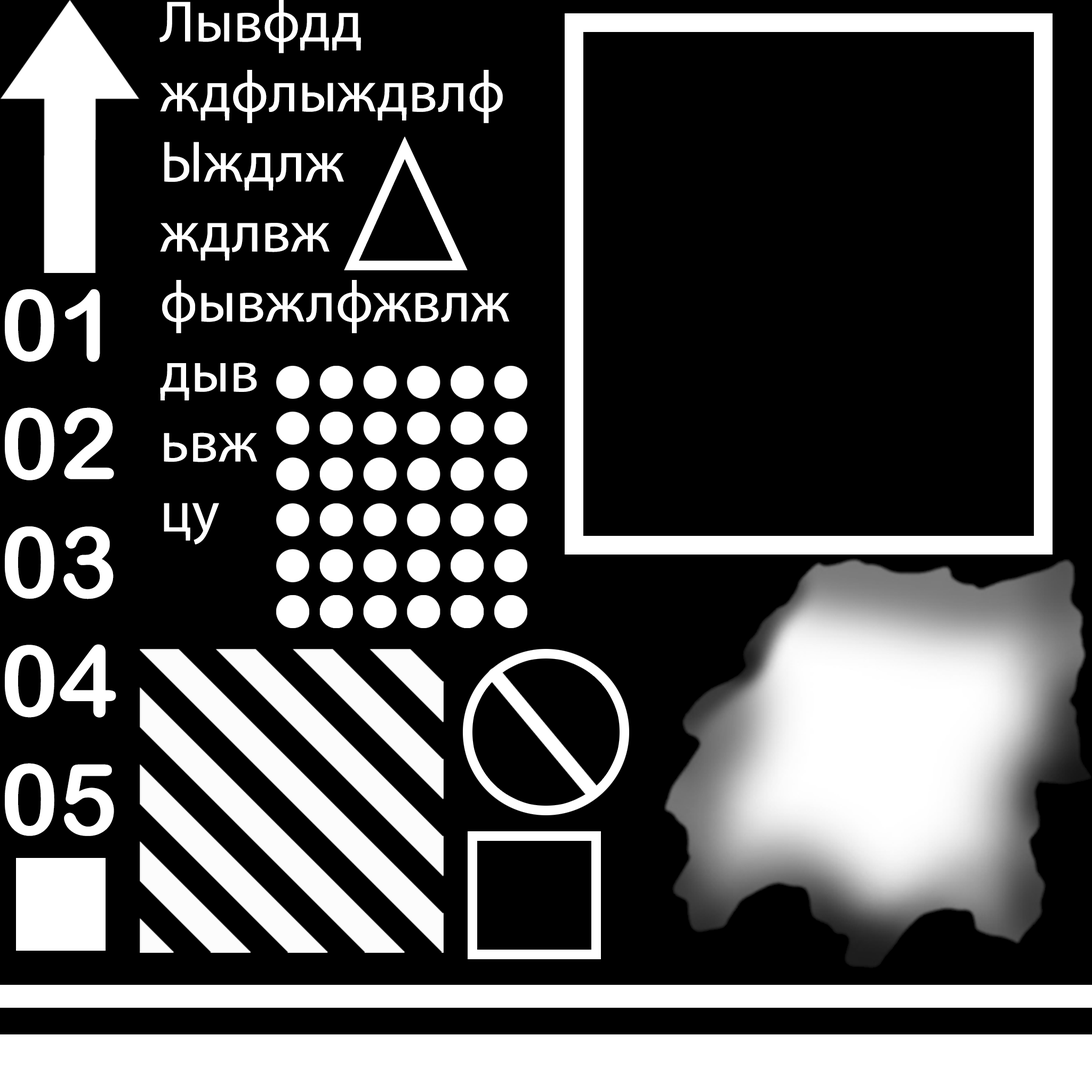
<style>
.page{position:relative;width:1092px;height:1092px;background:#000000}
.page>*{position:absolute;margin:0}
.t1{font:58.3px "MyriadPro-Regular";color:#ffffff}
.t2{font:98.8px "ArialRoundedMTBold";color:#ffffff}
</style>
<div class="page">
<p class="t1" style="left:159px;top:0px;width:351px;height:544px">Лывфдд<br>ждфлыждвлф<br>Ыждлж<br>ждлвж<br>фывжлфжвлж<br>дыв<br>ьвж<br>цу</p>
<p class="t2" style="left:5px;top:289px;width:111px;height:547px">01<br>02<br>03<br>04<br>05</p>
</div>
